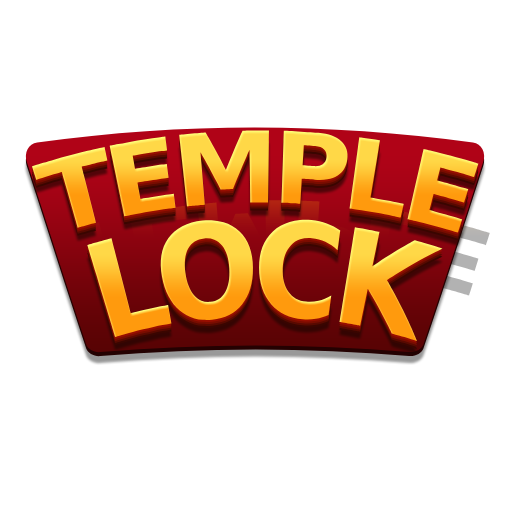
<style>
.page{position:relative;width:512px;height:512px;background:#ffffff}
.page>*{position:absolute;margin:0}
.t1{font:98.8px "AsketCondensed-ExtraBold";letter-spacing:-0.05em;text-transform:uppercase}
.t2{font:131.7px "AsketCondensed-ExtraBold";letter-spacing:-0.05em;text-transform:uppercase;scale:0.83 1}
</style>
<div class="page">
<p class="t1" style="left:32px;top:130px;width:447px;height:103px">temple</p>
<p class="t2" style="left:87px;top:219px;width:356px;height:123px">lock</p>
</div>
